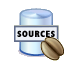
<style>
.page{position:relative;width:75px;height:66px;background:#ffffff}
.page>*{position:absolute;margin:0}
.t1{font:9px "Humanist521BT-XtraBoldCondensed";letter-spacing:0.05em;color:#000000;font-variant:small-caps}
</style>
<div class="page">
<p class="t1" style="left:17px;top:30px;width:38px;height:7px">SOURCES</p>
</div>
